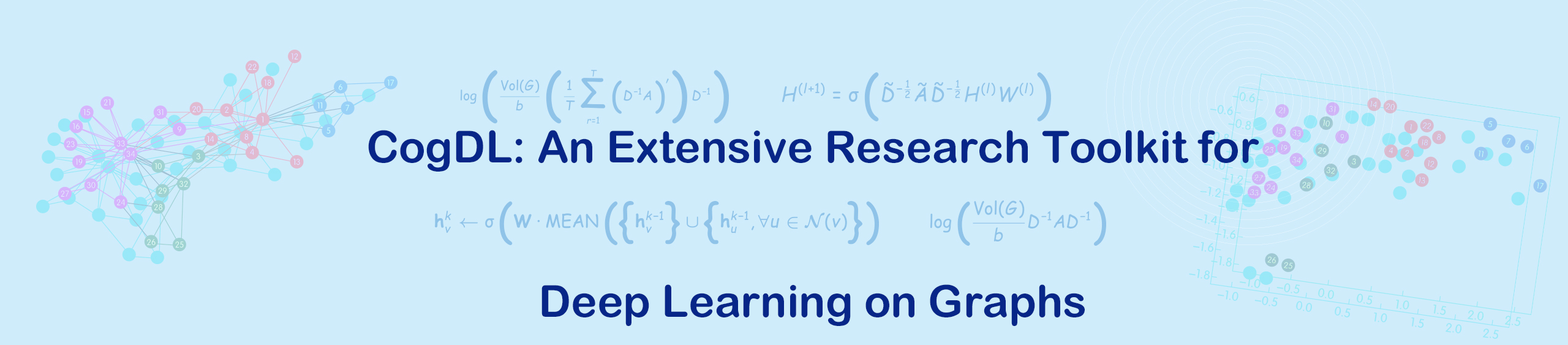
<style>
.page{position:relative;width:1568px;height:345px;background:#cfecfa}
.page>*{position:absolute;margin:0}
.t1{font:44.1px "ArialRoundedMTBold";color:#072688}
</style>
<div class="page">
<p class="t1" style="left:368px;top:130px;width:891px;height:196px;text-align:center">CogDL: An Extensive Research Toolkit for<br><br>Deep Learning on Graphs</p>
</div>
